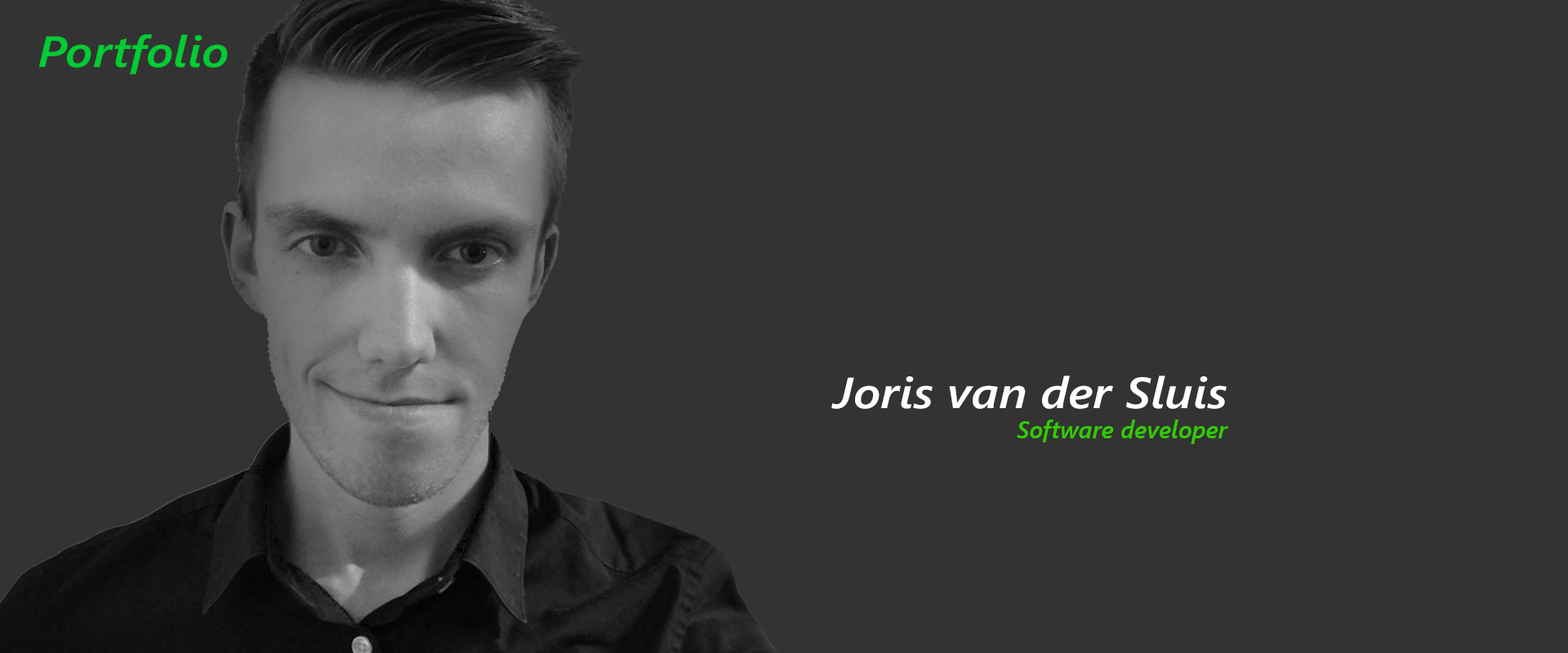
<style>
.page{position:relative;width:1568px;height:653px;background:#333333}
.page>*{position:absolute;margin:0}
.t1{font:43.6px "SegoeUI-SemiboldItalic";color:#00cc33;scale:1.12 1}
.t2{font:43.6px "SegoeUI-SemiboldItalic";color:#ffffff;scale:1.12 1}
.t3{font:24.5px "SegoeUI-SemiboldItalic";color:#33cc00}
</style>
<div class="page">
<p class="t1" style="left:38px;top:34px;width:190px;height:40px">Portfolio</p>
<p class="t2" style="left:831px;top:376px;width:396px;height:33px">Joris van der Sluis</p>
<p class="t3" style="left:1017px;top:420px;width:211px;height:24px">Software developer</p>
</div>
